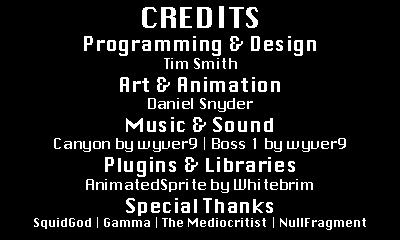
<style>
.page{position:relative;width:400px;height:240px;background:#000000}
.page>*{position:absolute;margin:0}
.t1{font:12px "Silom";color:#ffffff}
.t2{font:28.8px "Silom";color:#ffffff}
.t3{font:19.2px "Silom";color:#ffffff}
.t4{font:14.4px "Silom";color:#ffffff}
</style>
<div class="page">
<p class="t1" style="left:34px;top:6px;width:332px;height:224px;text-align:center"><span class="t2">CREDITS<br></span><span class="t3">Programming &amp; Design<br></span><span class="t4">Tim Smith<br></span><span class="t3">Art &amp; Animation<br></span><span class="t4">Daniel Snyder<br></span><span class="t3">Music &amp; Sound<br></span><span class="t4">Canyon by wyver9 | Boss 1 by wyver9<br></span><span class="t3">Plugins &amp; Libraries<br></span><span class="t4">AnimatedSprite by Whitebrim<br></span><span class="t3">Special Thanks<br></span>SquidGod | Gamma | The Mediocritist | NullFragment</p>
</div>
